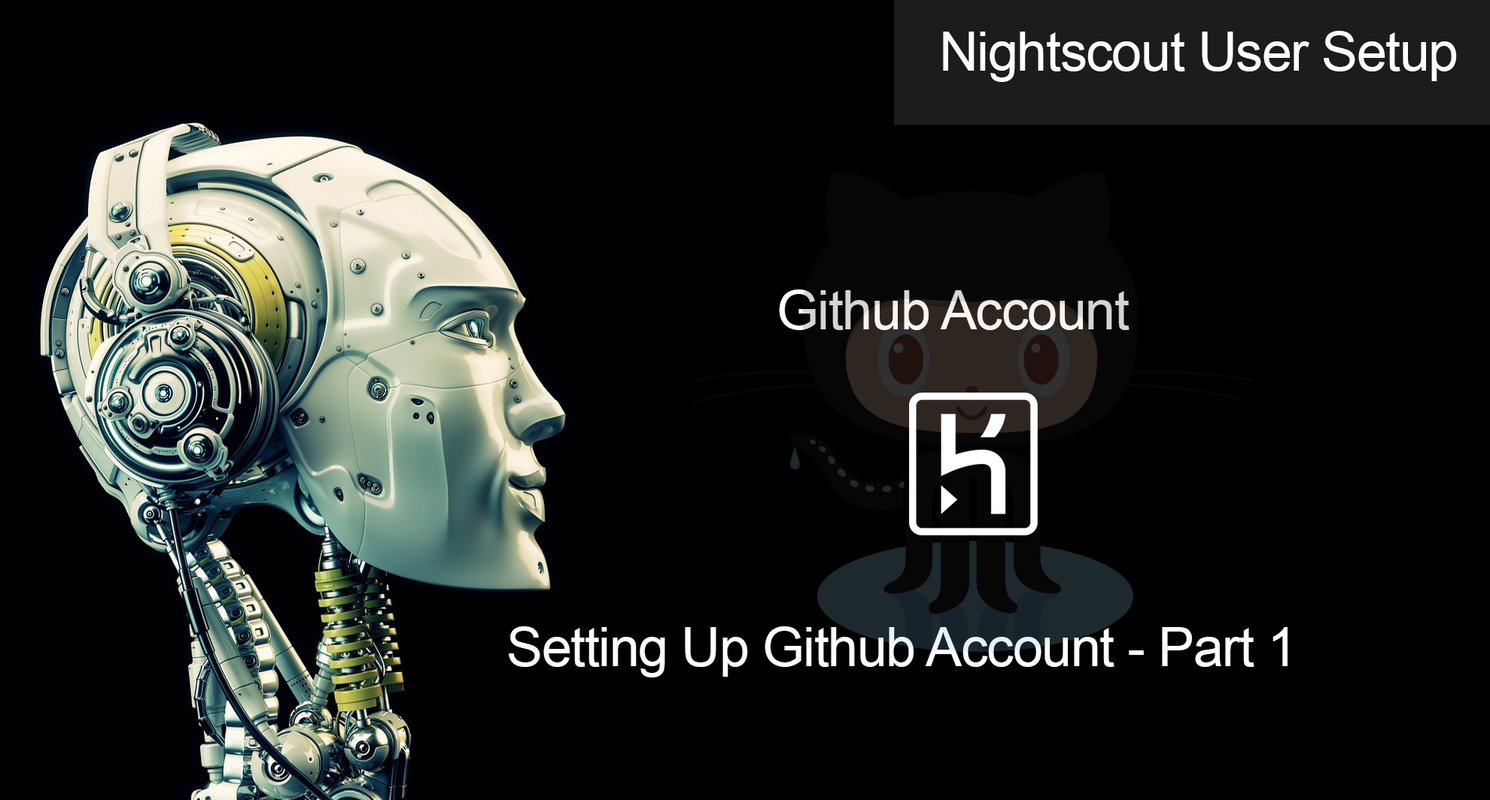
<style>
.page{position:relative;width:1490px;height:800px;background:#000000}
.page>*{position:absolute;margin:0}
.t1{font:54.2px "ArialMT";letter-spacing:-0.021em;color:#ffffff}
.t2{font:54.2px "ArialMT";letter-spacing:-0.021em}
</style>
<div class="page">
<p class="t1" style="left:943px;top:31px;width:514px;height:51px">Nightscout User Setup</p>
<p class="t2" style="left:779px;top:290px;width:350px;height:40px">Github Account</p>
<p class="t1" style="left:509px;top:627px;width:778px;height:51px">Setting Up Github Account - Part 1</p>
</div>
